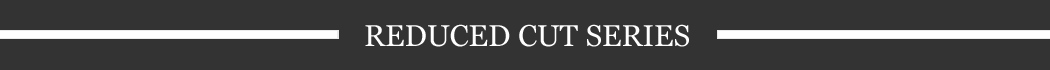
<style>
.page{position:relative;width:1050px;height:70px;background:#333333}
.page>*{position:absolute;margin:0}
.t1{font:29.9px "Georgia";color:#ffffff}
</style>
<div class="page">
<p class="t1" style="left:365px;top:24px;width:324px;height:23px">REDUCED CUT SERIES</p>
</div>
